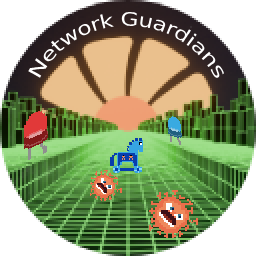
<style>
.page{position:relative;width:256px;height:256px;background:#ffffff}
.page>*{position:absolute;margin:0}
.t1{font:18.5px "DejaVuSans";color:#ffffff}
</style>
<div class="page">
<p class="t1" style="left:28px;top:12px;width:196px;height:66px">Network Guardians</p>
</div>
